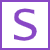
<style>
.page{position:relative;width:50px;height:50px;background:#ffffff}
.page>*{position:absolute;margin:0}
.t1{font:49px "LucidaConsole";color:#8948c5}
</style>
<div class="page">
<p class="t1" style="left:13px;top:8px;width:24px;height:33px">S</p>
</div>
